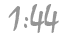
<style>
.page{position:relative;width:66px;height:36px;background:#ffffff}
.page>*{position:absolute;margin:0}
.t1{font:36px "Mistral";color:#959595}
</style>
<div class="page">
<p class="t1" style="left:8px;top:4px;width:51px;height:29px">1:44</p>
</div>
